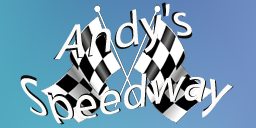
<style>
.page{position:relative;width:256px;height:128px}
.page>*{position:absolute;margin:0}
.t1{font:48px "MyriadPro-Regular";color:#fbfaf9}
.t2{font:48px "MyriadPro-Regular"}
</style>
<div class="page">
<p class="t1" style="left:55px;top:3px;width:137px;height:57px">Andy’s</p>
<p class="t2" style="left:20px;top:73px;width:214px;height:52px">Speedway</p>
<p class="t1" style="left:20px;top:73px;width:213px;height:51px">Speedway</p>
</div>
